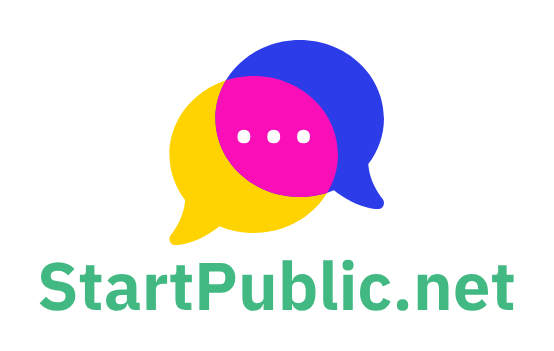
<style>
.page{position:relative;width:554px;height:351px;background:#ffffff}
.page>*{position:absolute;margin:0}
.t1{font:64px "IBMPlexSansJP-Bold";color:#42b983}
</style>
<div class="page">
<p class="t1" style="left:39px;top:259px;width:475px;height:52px">StartPublic.net</p>
</div>
